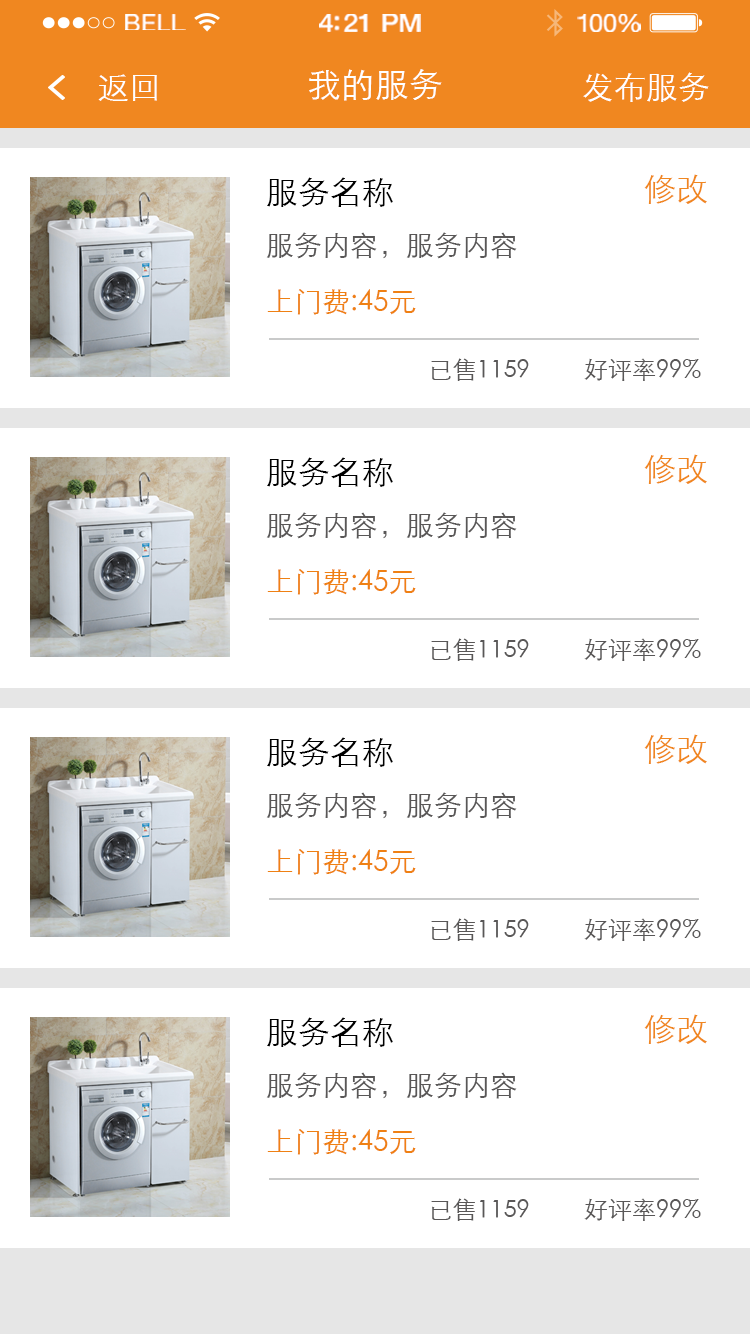
<style>
.page{position:relative;width:750px;height:1334px;background:#ffffff}
.page>*{position:absolute;margin:0}
.t1{font:23.3px "HelveticaNeue";letter-spacing:0.02em;color:#ffffff;scale:1.06 1}
.t2{font:25.3px "HelveticaNeue-Medium";letter-spacing:-0.02em;color:#ffffff;scale:1.06 1}
.t3{font:24.3px "HelveticaNeue";letter-spacing:-0.02em;color:#ffffff;scale:1.06 1}
.t4{font:32px "STXihei";color:#ffffff}
.t5{font:34px "STXihei";color:#ffffff}
.t6{font:32px "STXihei";color:#f08720}
.t7{font:28px/56px "STXihei";color:#595757}
.t8{font:32px/56px "STXihei";color:#000000}
.t9{font:28px/56px "STXihei";color:#ef8013}
.t10{font:24px "STXihei";color:#595757}
</style>
<div class="page">
<p class="t1" style="left:125px;top:14px;width:61px;height:16px">BELL</p>
<p class="t2" style="left:319px;top:14px;width:102px;height:18px">4:21 PM</p>
<p class="t3" style="left:577px;top:14px;width:64px;height:18px">100%</p>
<p class="t4" style="left:98px;top:74px;width:59px;height:27px">返回</p>
<p class="t5" style="left:309px;top:69px;width:133px;height:32px">我的服务</p>
<p class="t4" style="left:583px;top:72px;width:126px;height:30px">发布服务</p>
<p class="t6" style="left:644px;top:174px;width:63px;height:30px">修改</p>
<p class="t7" style="left:266px;top:177px;width:251px;height:138px"><span class="t8">服务名称<br></span>服务内容，服务内容<br><span class="t9">上门费:45元</span></p>
<p class="t10" style="left:431px;top:358px;width:270px;height:23px">已售1159         好评率99%</p>
<p class="t7" style="left:266px;top:457px;width:251px;height:138px"><span class="t8">服务名称<br></span>服务内容，服务内容<br><span class="t9">上门费:45元</span></p>
<p class="t6" style="left:644px;top:454px;width:63px;height:30px">修改</p>
<p class="t10" style="left:431px;top:638px;width:270px;height:23px">已售1159         好评率99%</p>
<p class="t7" style="left:266px;top:737px;width:251px;height:138px"><span class="t8">服务名称<br></span>服务内容，服务内容<br><span class="t9">上门费:45元</span></p>
<p class="t6" style="left:644px;top:734px;width:63px;height:30px">修改</p>
<p class="t10" style="left:431px;top:918px;width:270px;height:23px">已售1159         好评率99%</p>
<p class="t6" style="left:644px;top:1014px;width:63px;height:30px">修改</p>
<p class="t7" style="left:266px;top:1017px;width:251px;height:138px"><span class="t8">服务名称<br></span>服务内容，服务内容<br><span class="t9">上门费:45元</span></p>
<p class="t10" style="left:431px;top:1198px;width:270px;height:23px">已售1159         好评率99%</p>
</div>
